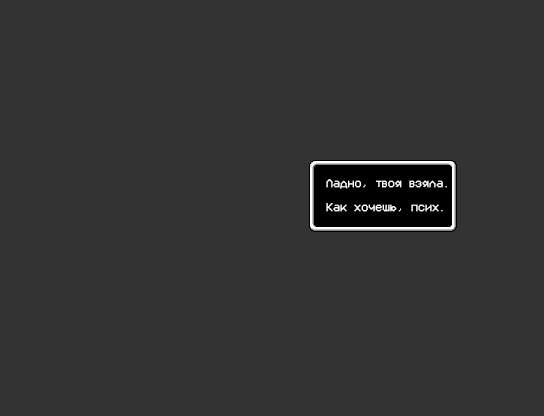
<style>
.page{position:relative;width:544px;height:416px;background:#333333}
.page>*{position:absolute;margin:0}
.t1{font:12px/24px "VCROSDMono";color:#ffffff}
</style>
<div class="page">
<p class="t1" style="left:326px;top:179px;width:121px;height:33px">Ладно, твоя взяла.<br>Как хочешь, псих.</p>
</div>
